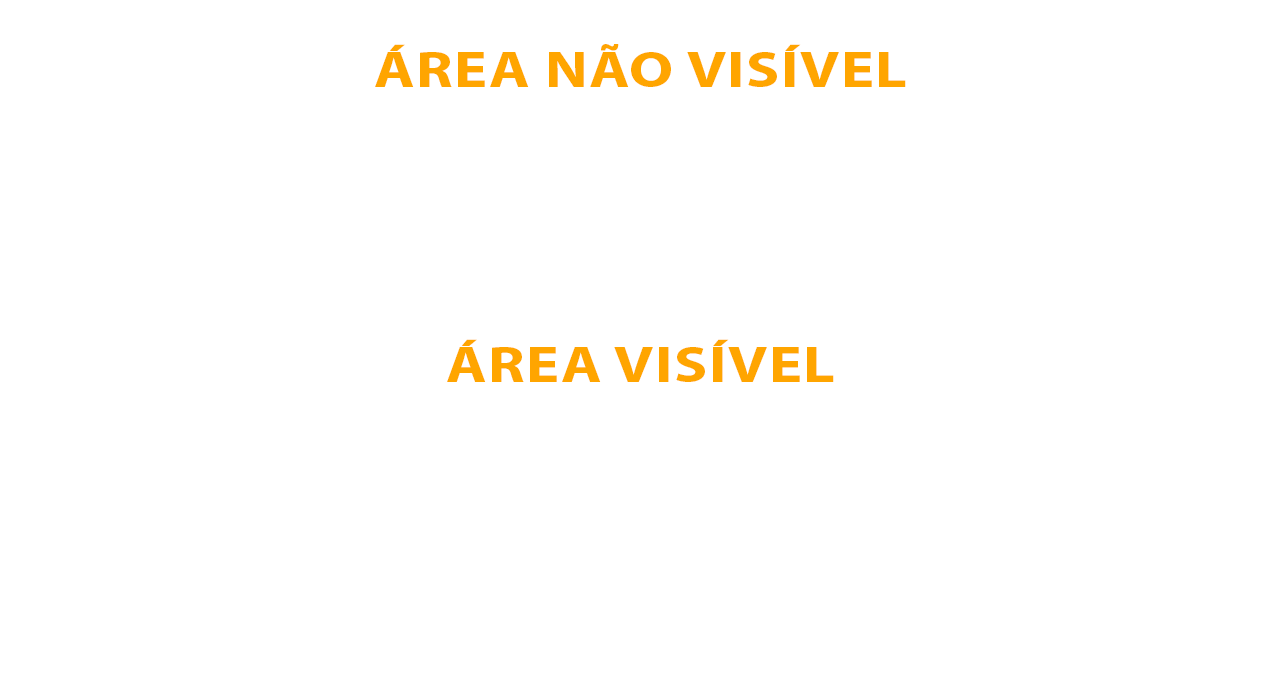
<style>
.page{position:relative;width:1280px;height:677px;background:#ffffff}
.page>*{position:absolute;margin:0}
.t1{font:51px "MyriadPro-Bold";letter-spacing:0.02em;color:#ffa500;scale:1.22 1}
</style>
<div class="page">
<p class="t1" style="left:375px;top:44px;width:531px;height:43px">ÁREA NÃO VISÍVEL</p>
<p class="t1" style="left:447px;top:339px;width:387px;height:43px">ÁREA VISÍVEL</p>
</div>
